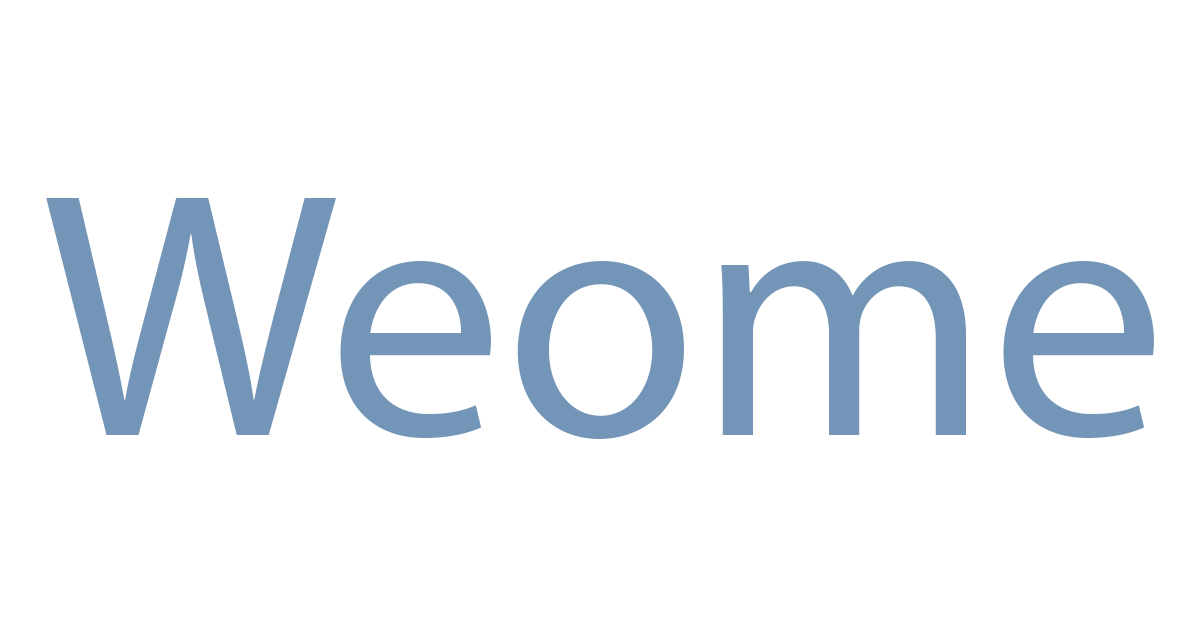
<style>
.page{position:relative;width:1200px;height:636px;background:#ffffff}
.page>*{position:absolute;margin:0}
.t1{font:352px "MyriadPro-Regular";color:#7396b8}
</style>
<div class="page">
<p class="t1" style="left:46px;top:198px;width:1108px;height:241px">Weome</p>
</div>
